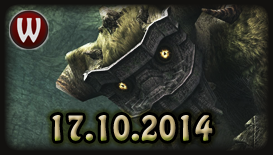
<style>
.page{position:relative;width:273px;height:155px}
.page>*{position:absolute;margin:0}
.t1{font:30px "HoboStd";font-weight:bold}
</style>
<div class="page">
<p class="t1" style="left:52px;top:115px;width:161px;height:26px">17.10.2014</p>
</div>
